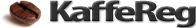
<style>
.page{position:relative;width:196px;height:28px;background:#ffffff}
.page>*{position:absolute;margin:0}
.t1{font:30px "MyriadPro-BoldCond";letter-spacing:-0.08em;color:#2f2f2f;scale:1.87 1}
</style>
<div class="page">
<p class="t1" style="left:50px;top:0px;width:146px;height:28px">KaffeReg</p>
</div>
